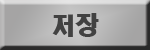
<style>
.page{position:relative;width:150px;height:50px}
.page>*{position:absolute;margin:0}
.t1{font:24px "HeadlineR-HM";color:#424242}
</style>
<div class="page">
<p class="t1" style="left:52px;top:13px;width:47px;height:24px">저장</p>
</div>
